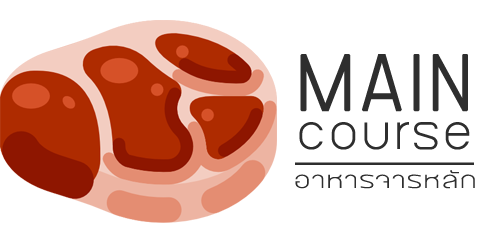
<style>
.page{position:relative;width:500px;height:250px;background:#ffffff}
.page>*{position:absolute;margin:0}
.t1{font:75px "BangnaNew";color:#2e2e2e;font-weight:bold}
.t2{font:50px "BangnaNew";color:#2e2e2e;text-decoration:underline;scale:1.05 1}
.t3{font:20.8px "BangnaNew";color:#2e2e2e;scale:1.4 1}
</style>
<div class="page">
<p class="t1" style="left:300px;top:54px;width:168px;height:58px">MAIN</p>
<p class="t2" style="left:295px;top:122px;width:179px;height:43px">course</p>
<p class="t3" style="left:295px;top:170px;width:180px;height:19px">อาหารจารหลัก</p>
</div>
